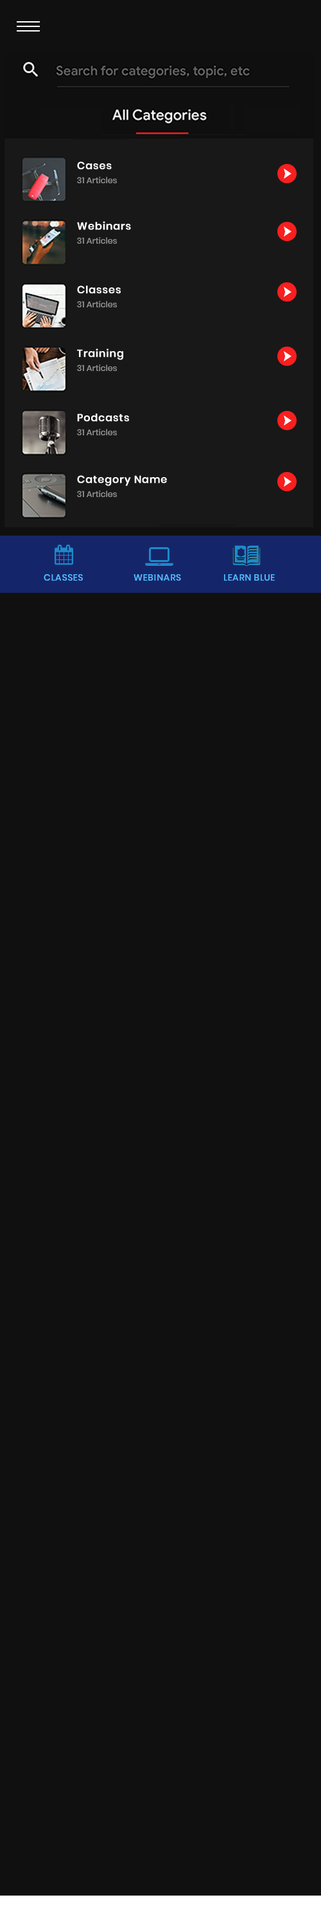
<style>
.page{position:relative;width:321px;height:1929px;background:#101010}
.page>*{position:absolute;margin:0}
.t1{font:10.3px "Poppins-Medium";color:#ffffff;font-weight:bold}
.t2{font:8.4px "Poppins-Medium";color:#8d8d8d}
.t3{font:9px "Poppins-Medium";letter-spacing:0.04em;color:#53bdff;text-transform:uppercase}
</style>
<div class="page">
<p class="t1" style="left:77px;top:161px;width:35px;height:9px">Cases</p>
<p class="t2" style="left:77px;top:176px;width:40px;height:7px">31 Articles</p>
<p class="t1" style="left:77px;top:221px;width:54px;height:9px">Webinars</p>
<p class="t2" style="left:77px;top:237px;width:40px;height:7px">31 Articles</p>
<p class="t1" style="left:77px;top:285px;width:44px;height:9px">Classes</p>
<p class="t2" style="left:77px;top:300px;width:40px;height:7px">31 Articles</p>
<p class="t1" style="left:77px;top:348px;width:46px;height:12px">Training</p>
<p class="t2" style="left:77px;top:364px;width:40px;height:7px">31 Articles</p>
<p class="t1" style="left:77px;top:413px;width:52px;height:9px">Podcasts</p>
<p class="t2" style="left:77px;top:428px;width:40px;height:7px">31 Articles</p>
<p class="t1" style="left:77px;top:475px;width:90px;height:11px">Category Name</p>
<p class="t2" style="left:77px;top:490px;width:40px;height:7px">31 Articles</p>
<p class="t3" style="left:44px;top:574px;width:39px;height:6px">classes</p>
<p class="t3" style="left:134px;top:574px;width:47px;height:6px">webinars</p>
<p class="t3" style="left:224px;top:574px;width:51px;height:6px">learn blue</p>
</div>
